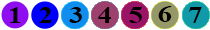
<style>
.page{position:relative;width:210px;height:30px;background:#ffffff}
.page>*{position:absolute;margin:0}
.t1{font:23.9px "TimesNewRomanPS-BoldMT";color:#000000;scale:1.2 1}
</style>
<div class="page">
<p class="t1" style="left:158px;top:6px;width:14px;height:16px">6</p>
<p class="t1" style="left:10px;top:7px;width:11px;height:16px">1</p>
<p class="t1" style="left:39px;top:7px;width:13px;height:16px">2</p>
<p class="t1" style="left:69px;top:7px;width:13px;height:16px">3</p>
<p class="t1" style="left:98px;top:7px;width:13px;height:16px">4</p>
<p class="t1" style="left:129px;top:7px;width:13px;height:16px">5</p>
<p class="t1" style="left:189px;top:7px;width:13px;height:16px">7</p>
</div>
